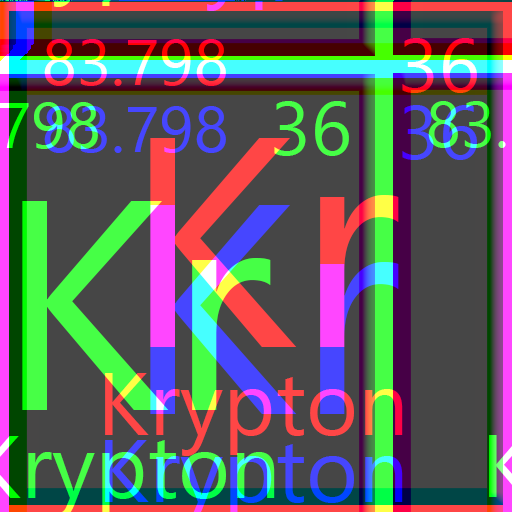
<style>
.page{position:relative;width:512px;height:512px;background:#464646}
.page>*{position:absolute;margin:0}
.t1{font:64px "SegoeUI"}
.t2{font:76px "SegoeUI"}
.t3{font:298.7px "SegoeUI"}
.t4{font:89.3px "SegoeUI"}
</style>
<div class="page">
<p class="t1" style="left:44px;top:37px;width:182px;height:47px">83.798</p>
<p class="t2" style="left:402px;top:36px;width:75px;height:55px">36</p>
<p class="t3" style="left:150px;top:136px;width:249px;height:209px">Kr</p>
<p class="t4" style="left:105px;top:371px;width:298px;height:83px">Krypton</p>
</div>
